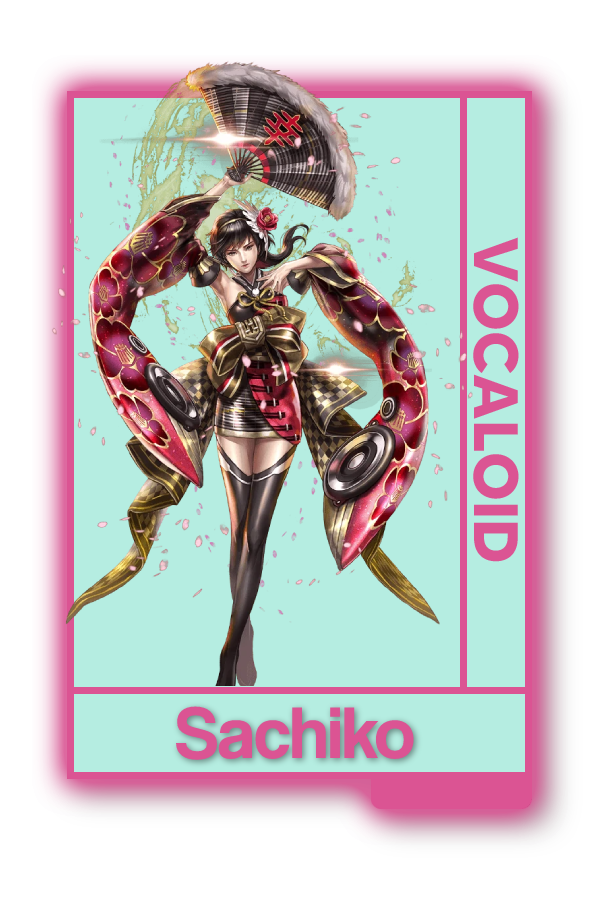
<style>
.page{position:relative;width:600px;height:900px;background:#b5ede1}
.page>*{position:absolute;margin:0}
.t1{font:62.5px "MADETOMMY-Bold";color:#db5493}
.t2{font:75px "CoolveticaRg-Regular";color:#db5493}
</style>
<div class="page">
<p class="t1" style="left:473px;top:237px;width:46px;height:325px;rotate:90deg">VOCALOID</p>
<p class="t2" style="left:176px;top:706px;width:238px;height:54px">Sachiko</p>
</div>
